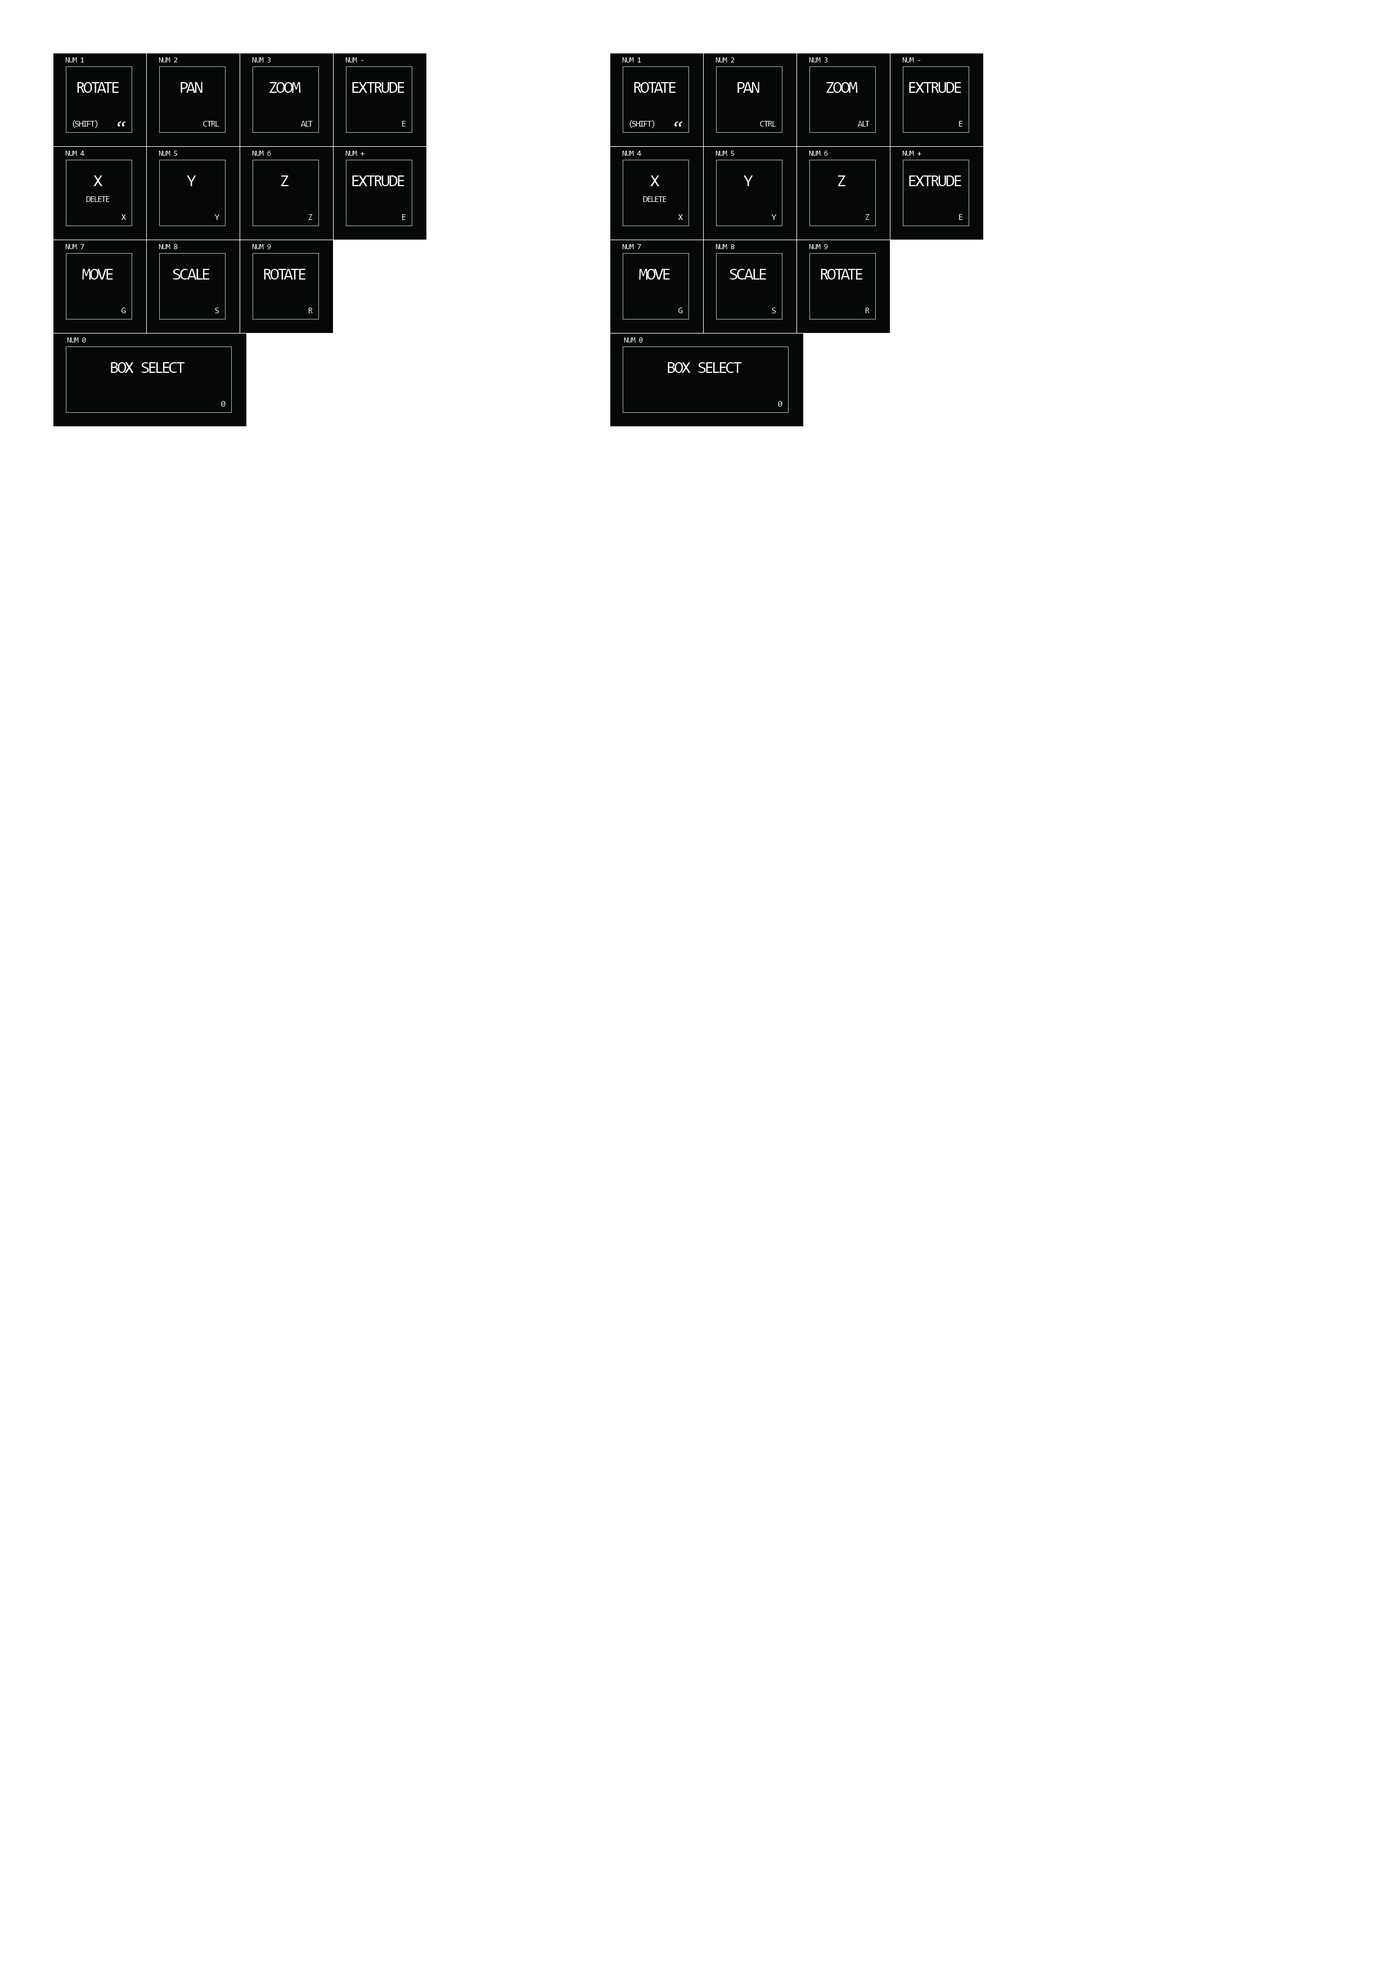
<style>
.page{position:relative;width:1395px;height:1973px;background:#ffffff}
.page>*{position:absolute;margin:0}
.t1{font:7.9px "Consolas";letter-spacing:-0.075em;color:#ffffff}
.t2{font:16.9px "Consolas";letter-spacing:-0.075em;color:#ffffff}
.t3{font:9px "Consolas";letter-spacing:-0.075em;color:#ffffff}
</style>
<div class="page">
<p class="t1" style="left:65px;top:57px;width:19px;height:5px">NUM 1</p>
<p class="t1" style="left:159px;top:57px;width:19px;height:5px">NUM 2</p>
<p class="t1" style="left:252px;top:57px;width:19px;height:5px">NUM 3</p>
<p class="t1" style="left:345px;top:57px;width:19px;height:5px">NUM -</p>
<p class="t1" style="left:622px;top:57px;width:19px;height:5px">NUM 1</p>
<p class="t1" style="left:716px;top:57px;width:19px;height:5px">NUM 2</p>
<p class="t1" style="left:809px;top:57px;width:19px;height:5px">NUM 3</p>
<p class="t1" style="left:902px;top:57px;width:19px;height:5px">NUM -</p>
<p class="t2" style="left:77px;top:82px;width:42px;height:11px">ROTATE</p>
<p class="t2" style="left:181px;top:82px;width:21px;height:11px">PAN</p>
<p class="t2" style="left:269px;top:82px;width:32px;height:11px">ZOOM</p>
<p class="t2" style="left:352px;top:82px;width:52px;height:11px">EXTRUDE</p>
<p class="t2" style="left:634px;top:82px;width:42px;height:11px">ROTATE</p>
<p class="t2" style="left:737px;top:82px;width:22px;height:11px">PAN</p>
<p class="t2" style="left:826px;top:82px;width:32px;height:11px">ZOOM</p>
<p class="t2" style="left:909px;top:82px;width:52px;height:11px">EXTRUDE</p>
<p class="t3" style="left:73px;top:120px;width:25px;height:8px">(SHIFT)</p>
<p class="t2" style="left:118px;top:122px;width:8px;height:5px">“</p>
<p class="t3" style="left:203px;top:121px;width:16px;height:6px">CTRL</p>
<p class="t3" style="left:301px;top:121px;width:12px;height:6px">ALT</p>
<p class="t3" style="left:402px;top:121px;width:4px;height:6px">E</p>
<p class="t3" style="left:629px;top:120px;width:26px;height:8px">(SHIFT)</p>
<p class="t2" style="left:674px;top:122px;width:9px;height:5px">“</p>
<p class="t3" style="left:760px;top:121px;width:16px;height:6px">CTRL</p>
<p class="t3" style="left:858px;top:121px;width:12px;height:6px">ALT</p>
<p class="t3" style="left:959px;top:121px;width:3px;height:6px">E</p>
<p class="t1" style="left:65px;top:151px;width:20px;height:5px">NUM 4</p>
<p class="t1" style="left:159px;top:151px;width:19px;height:5px">NUM 5</p>
<p class="t1" style="left:252px;top:151px;width:19px;height:5px">NUM 6</p>
<p class="t1" style="left:345px;top:151px;width:19px;height:5px">NUM +</p>
<p class="t1" style="left:622px;top:151px;width:20px;height:5px">NUM 4</p>
<p class="t1" style="left:716px;top:151px;width:19px;height:5px">NUM 5</p>
<p class="t1" style="left:809px;top:151px;width:19px;height:5px">NUM 6</p>
<p class="t1" style="left:902px;top:151px;width:19px;height:5px">NUM +</p>
<p class="t2" style="left:93px;top:176px;width:9px;height:10px">X</p>
<p class="t2" style="left:187px;top:176px;width:9px;height:10px">Y</p>
<p class="t2" style="left:281px;top:176px;width:8px;height:10px">Z</p>
<p class="t2" style="left:352px;top:176px;width:52px;height:10px">EXTRUDE</p>
<p class="t2" style="left:650px;top:176px;width:9px;height:10px">X</p>
<p class="t2" style="left:744px;top:176px;width:9px;height:10px">Y</p>
<p class="t2" style="left:838px;top:176px;width:7px;height:10px">Z</p>
<p class="t2" style="left:909px;top:176px;width:52px;height:10px">EXTRUDE</p>
<p class="t3" style="left:86px;top:196px;width:24px;height:6px">DELETE</p>
<p class="t3" style="left:643px;top:196px;width:24px;height:6px">DELETE</p>
<p class="t3" style="left:121px;top:214px;width:5px;height:6px">X</p>
<p class="t3" style="left:214px;top:214px;width:6px;height:6px">Y</p>
<p class="t3" style="left:308px;top:214px;width:5px;height:6px">Z</p>
<p class="t3" style="left:402px;top:214px;width:4px;height:6px">E</p>
<p class="t3" style="left:678px;top:214px;width:5px;height:6px">X</p>
<p class="t3" style="left:771px;top:214px;width:6px;height:6px">Y</p>
<p class="t3" style="left:865px;top:214px;width:5px;height:6px">Z</p>
<p class="t3" style="left:959px;top:214px;width:3px;height:6px">E</p>
<p class="t1" style="left:65px;top:244px;width:19px;height:5px">NUM 7</p>
<p class="t1" style="left:159px;top:244px;width:19px;height:5px">NUM 8</p>
<p class="t1" style="left:252px;top:244px;width:19px;height:5px">NUM 9</p>
<p class="t1" style="left:622px;top:244px;width:19px;height:5px">NUM 7</p>
<p class="t1" style="left:716px;top:244px;width:19px;height:5px">NUM 8</p>
<p class="t1" style="left:809px;top:244px;width:19px;height:5px">NUM 9</p>
<p class="t2" style="left:82px;top:269px;width:31px;height:11px">MOVE</p>
<p class="t2" style="left:173px;top:269px;width:36px;height:11px">SCALE</p>
<p class="t2" style="left:264px;top:269px;width:41px;height:11px">ROTATE</p>
<p class="t2" style="left:639px;top:269px;width:31px;height:11px">MOVE</p>
<p class="t2" style="left:730px;top:269px;width:36px;height:11px">SCALE</p>
<p class="t2" style="left:821px;top:269px;width:41px;height:11px">ROTATE</p>
<p class="t3" style="left:121px;top:308px;width:5px;height:5px">G</p>
<p class="t3" style="left:215px;top:308px;width:4px;height:5px">S</p>
<p class="t3" style="left:308px;top:308px;width:5px;height:5px">R</p>
<p class="t3" style="left:678px;top:308px;width:5px;height:5px">G</p>
<p class="t3" style="left:772px;top:308px;width:4px;height:5px">S</p>
<p class="t3" style="left:865px;top:308px;width:5px;height:5px">R</p>
<p class="t1" style="left:67px;top:338px;width:19px;height:5px">NUM 0</p>
<p class="t1" style="left:624px;top:338px;width:19px;height:5px">NUM 0</p>
<p class="t2" style="left:111px;top:362px;width:74px;height:11px">BOX SELECT</p>
<p class="t2" style="left:668px;top:362px;width:74px;height:11px">BOX SELECT</p>
<p class="t3" style="left:221px;top:401px;width:5px;height:6px">0</p>
<p class="t3" style="left:778px;top:401px;width:4px;height:6px">0</p>
</div>
